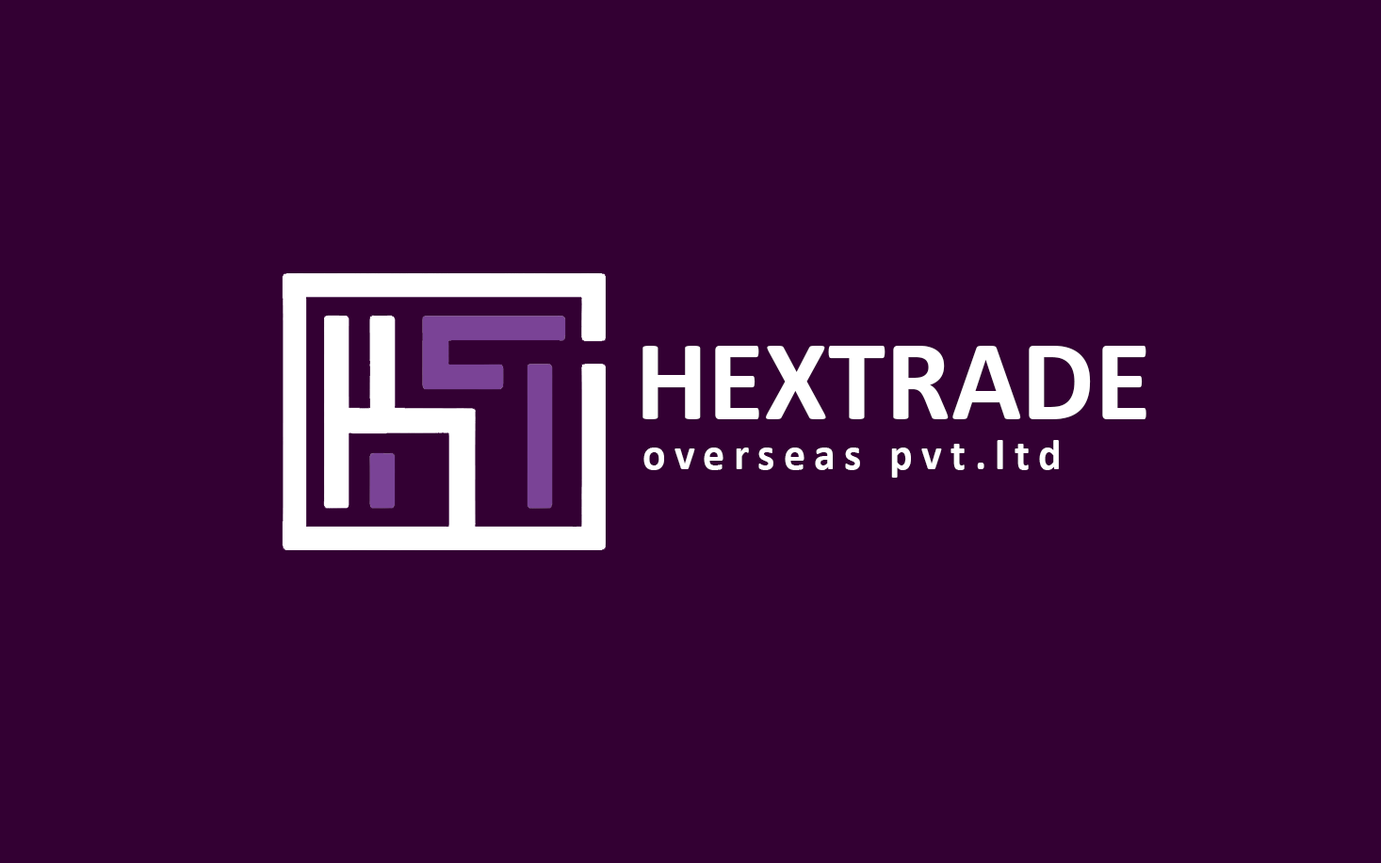
<style>
.page{position:relative;width:1381px;height:863px;background:#330033}
.page>*{position:absolute;margin:0}
.t1{font:116.1px "Calibri-Bold";color:#ffffff}
.t2{font:43.6px "Calibri-Bold";letter-spacing:0.2em;color:#ffffff}
</style>
<div class="page">
<p class="t1" style="left:643px;top:346px;width:504px;height:73px">HEXTRADE</p>
<p class="t2" style="left:644px;top:440px;width:415px;height:38px">overseas pvt.ltd</p>
</div>
